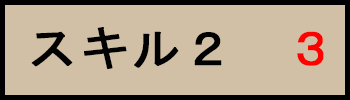
<style>
.page{position:relative;width:350px;height:100px;background:#d1c0a5}
.page>*{position:absolute;margin:0}
.t1{font:48px "MS-Gothic";letter-spacing:0.05em;color:#010101;font-weight:bold}
.t2{font:48px "MS-Gothic";letter-spacing:0.05em;color:#ff0000;font-weight:bold}
</style>
<div class="page">
<p class="t1" style="left:31px;top:27px;width:293px;height:42px">スキル２　<span class="t2">３</span></p>
</div>
